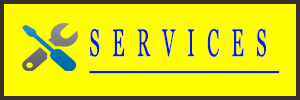
<style>
.page{position:relative;width:300px;height:100px;background:#ffff00}
.page>*{position:absolute;margin:0}
.t1{font:38.6px "Vani";letter-spacing:0.665em;color:#0018ff;text-decoration:underline;scale:0.48 1}
</style>
<div class="page">
<p class="t1" style="left:89px;top:28px;width:191px;height:46px">SERVICES</p>
</div>
